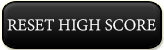
<style>
.page{position:relative;width:164px;height:50px}
.page>*{position:absolute;margin:0}
.t1{font:17.8px "AdobeDevanagari-Regular";color:#ffffff}
</style>
<div class="page">
<p class="t1" style="left:7px;top:19px;width:149px;height:12px">RESET HIGH SCORE</p>
</div>
